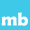
<style>
.page{position:relative;width:30px;height:30px;background:#3dc9e7}
.page>*{position:absolute;margin:0}
.t1{font:18.7px "BerlinSansFBDemi-Bold";color:#fbfafa}
</style>
<div class="page">
<p class="t1" style="left:1px;top:12px;width:27px;height:14px">mb</p>
</div>
